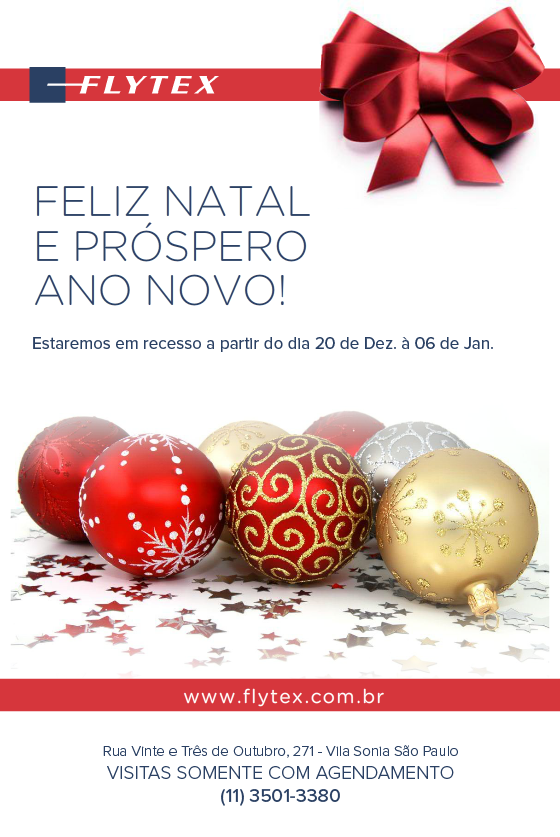
<style>
.page{position:relative;width:560px;height:837px;background:#ffffff}
.page>*{position:absolute;margin:0}
.t1{font:17px "ProximaNova-Medium";color:#2a4063}
.t2{font:14.9px "ProximaNova-Light";color:#2a4063}
.t3{font:19.2px "ProximaNova-Light";color:#2a4063}
.t4{font:19.2px "ProximaNova-Medium";color:#2a4063}
</style>
<div class="page">
<p class="t1" style="left:33px;top:337px;width:460px;height:15px">Estaremos em recesso a partir do dia 20 de Dez. à 06 de Jan.</p>
<p class="t2" style="left:103px;top:745px;width:355px;height:61px;text-align:center">Rua Vinte e Três de Outubro, 271 - Vila Sonia São Paulo<br><span class="t3">VISITAS SOMENTE COM AGENDAMENTO<br></span><span class="t4">(11) 3501-3380</span></p>
</div>
